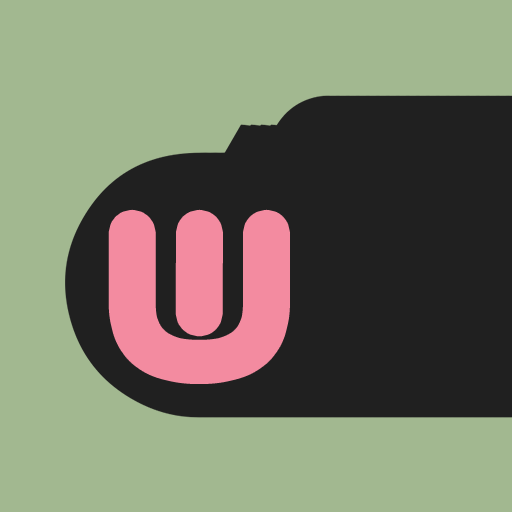
<style>
.page{position:relative;width:512px;height:512px;background:#a2b890}
.page>*{position:absolute;margin:0}
.t1{font:250px "VarelaRound-Regular";letter-spacing:0.025em;color:#f38ba0}
</style>
<div class="page">
<p class="t1" style="left:120px;top:221px;width:158px;height:151px">ש</p>
</div>
